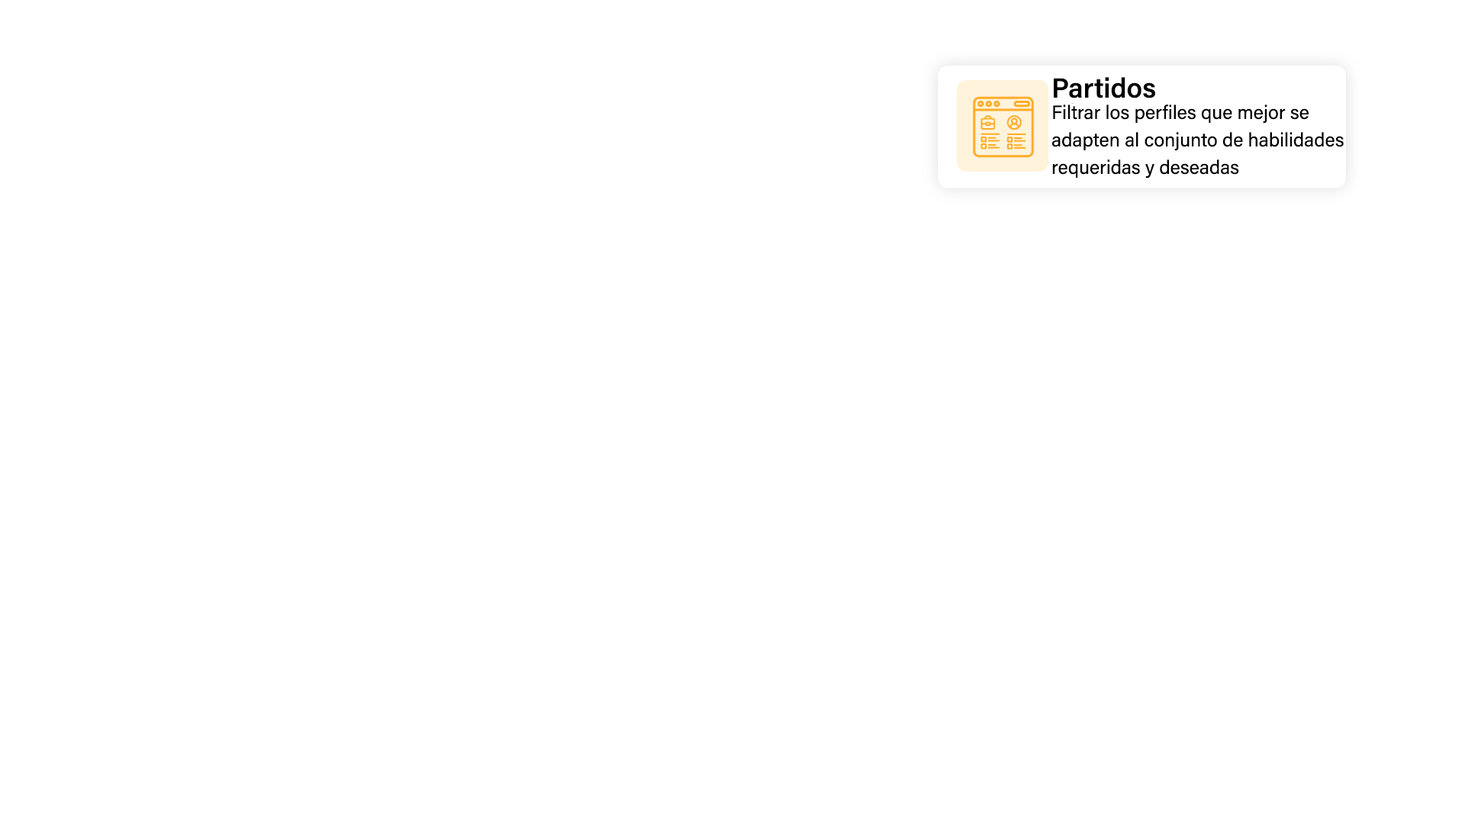
<style>
.page{position:relative;width:1465px;height:814px;background:#ffffff}
.page>*{position:absolute;margin:0}
.t1{font:27.5px "AcuminConcept_578.000wght";color:#000000}
.t2{font:19.1px/13.7px "AcuminConcept-Regular";color:#000000}
</style>
<div class="page">
<p class="t1" style="left:1054px;top:77px;width:101px;height:21px">Partidos</p>
<p class="t2" style="left:1052px;top:105px;width:292px;height:74px">Filtrar los perfiles que mejor se <br><br>adapten al conjunto de habilidades <br><br>requeridas y deseadas</p>
</div>
